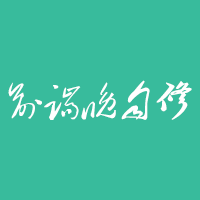
<style>
.page{position:relative;width:200px;height:200px;background:#38bb9c}
.page>*{position:absolute;margin:0}
.t1{font:37.5px "²ÝÌ´Õ«Ã«Ôó¶«Ìå";color:#ffffff}
</style>
<div class="page">
<p class="t1" style="left:8px;top:80px;width:184px;height:40px">前端晚自修</p>
</div>
